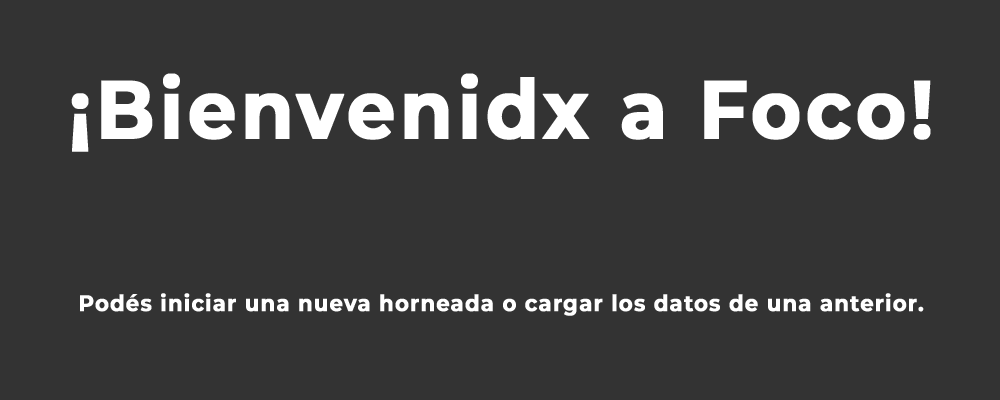
<style>
.page{position:relative;width:1000px;height:400px;background:#333333}
.page>*{position:absolute;margin:0}
.t1{font:82.1px "Montserrat-Bold";letter-spacing:0.04em;color:#ffffff;font-weight:bold;scale:0.93 1}
.t2{font:22.6px "Montserrat-Bold";letter-spacing:0.04em;color:#ffffff;font-weight:bold;scale:0.93 1}
</style>
<div class="page">
<p class="t1" style="left:71px;top:73px;width:860px;height:79px">¡Bienvenidx a Foco!</p>
<p class="t2" style="left:80px;top:293px;width:844px;height:23px">Podés iniciar una nueva horneada o cargar los datos de una anterior.</p>
</div>
